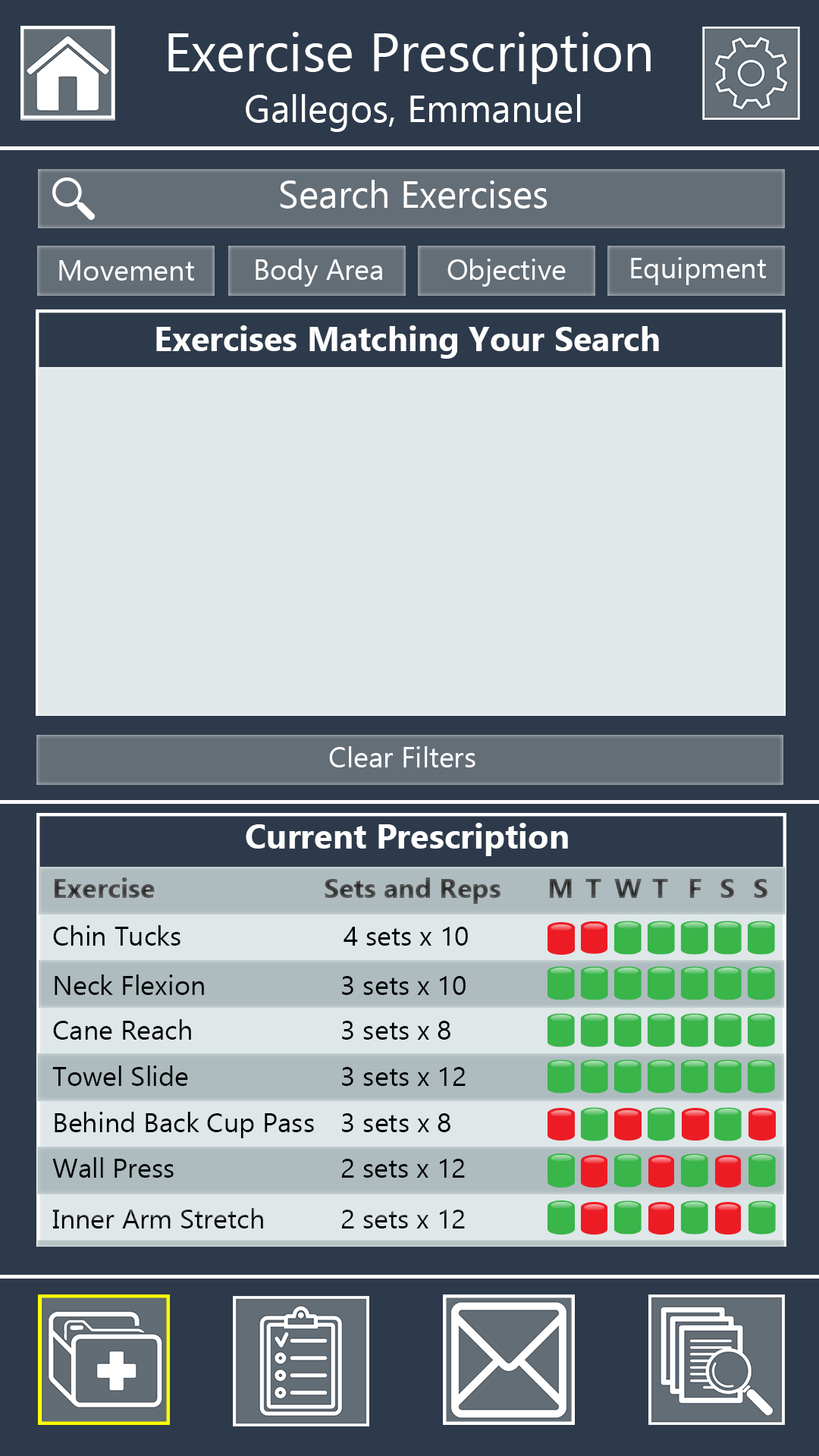
<style>
.page{position:relative;width:819px;height:1456px;background:#2d3a4b}
.page>*{position:absolute;margin:0}
.t1{font:54.6px "Ebrima";color:#ffffff}
.t2{font:37.9px "Ebrima";color:#ffffff}
.t3{font:28.8px "Ebrima";color:#ffffff}
.t4{font:34.1px "Ebrima-Bold";color:#ffffff}
.t5{font:27.3px "Ebrima-Bold";color:#494949}
.t6{font:27.3px "Ebrima-Bold";color:#444444}
.t7{font:27.3px "Ebrima-Bold";color:#4c4c4c}
.t8{font:27.3px "Ebrima-Bold";color:#4d4d4d}
.t9{font:27.3px "Ebrima";color:#000000}
</style>
<div class="page">
<p class="t1" style="left:168px;top:32px;width:483px;height:52px">Exercise Prescription</p>
<p class="t2" style="left:246px;top:94px;width:335px;height:38px">Gallegos, Emmanuel</p>
<p class="t2" style="left:280px;top:180px;width:267px;height:29px">Search Exercises</p>
<p class="t3" style="left:631px;top:257px;width:135px;height:28px">Equipment</p>
<p class="t3" style="left:59px;top:260px;width:135px;height:21px">Movement</p>
<p class="t3" style="left:256px;top:259px;width:126px;height:28px">Body Area</p>
<p class="t3" style="left:447px;top:259px;width:119px;height:28px">Objective</p>
<p class="t4" style="left:156px;top:325px;width:503px;height:34px">Exercises Matching Your Search</p>
<p class="t3" style="left:329px;top:746px;width:146px;height:21px">Clear Filters</p>
<p class="t4" style="left:246px;top:823px;width:322px;height:33px">Current Prescription</p>
<p class="t5" style="left:54px;top:877px;width:446px;height:27px">Exercise            Sets and Reps</p>
<p class="t6" style="left:549px;top:879px;width:23px;height:19px">M</p>
<p class="t7" style="left:585px;top:879px;width:16px;height:19px">T</p>
<p class="t6" style="left:614px;top:879px;width:28px;height:19px">W</p>
<p class="t7" style="left:652px;top:879px;width:16px;height:19px">T</p>
<p class="t8" style="left:689px;top:879px;width:12px;height:19px">F</p>
<p class="t8" style="left:720px;top:879px;width:14px;height:19px">S</p>
<p class="t8" style="left:754px;top:879px;width:13px;height:19px">S</p>
<p class="t9" style="left:53px;top:925px;width:415px;height:21px">Chin Tucks                   4 sets x 10</p>
<p class="t9" style="left:55px;top:974px;width:411px;height:21px">Neck Flexion               3 sets x 10</p>
<p class="t9" style="left:53px;top:1019px;width:397px;height:21px">Cane Reach               3 sets x 8</p>
<p class="t9" style="left:52px;top:1065px;width:414px;height:21px">Towel Slide                 3 sets x 12</p>
<p class="t9" style="left:55px;top:1112px;width:259px;height:26px">Behind Back Cup Pass</p>
<p class="t9" style="left:342px;top:1113px;width:108px;height:19px">3 sets x 8</p>
<p class="t9" style="left:52px;top:1157px;width:413px;height:21px">Wall Press        2 sets x 12</p>
<p class="t9" style="left:52px;top:1208px;width:413px;height:20px">Inner Arm Stretch     2 sets x 12</p>
</div>
